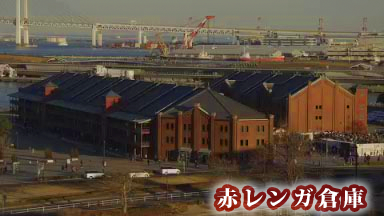
<style>
.page{position:relative;width:384px;height:216px}
.page>*{position:absolute;margin:0}
.t1{font:21px "KozMinPr6N-Heavy";letter-spacing:0.2em;color:#ffffff}
</style>
<div class="page">
<p class="t1" style="left:217px;top:188px;width:147px;height:20px">赤レンガ倉庫</p>
</div>
